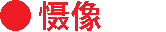
<style>
.page{position:relative;width:166px;height:32px;background:#ffffff}
.page>*{position:absolute;margin:0}
.t1{font:32px "SourceHanSansSC-Bold";color:#ee1c24}
</style>
<div class="page">
<p class="t1" style="left:39px;top:1px;width:62px;height:30px">慑像</p>
</div>
